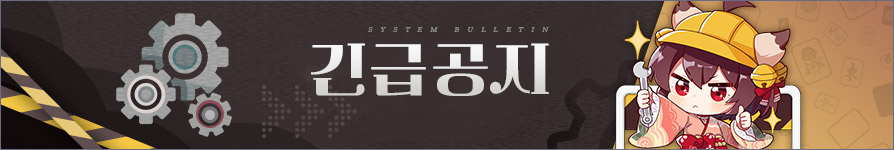
<style>
.page{position:relative;width:894px;height:150px}
.page>*{position:absolute;margin:0}
.t1{font:63.7px "Cafe24ClassicType-Regular";letter-spacing:0.04em;color:#e6e6e5;scale:0.93 1}
</style>
<div class="page">
<p class="t1" style="left:311px;top:43px;width:238px;height:53px">긴급공지</p>
</div>
